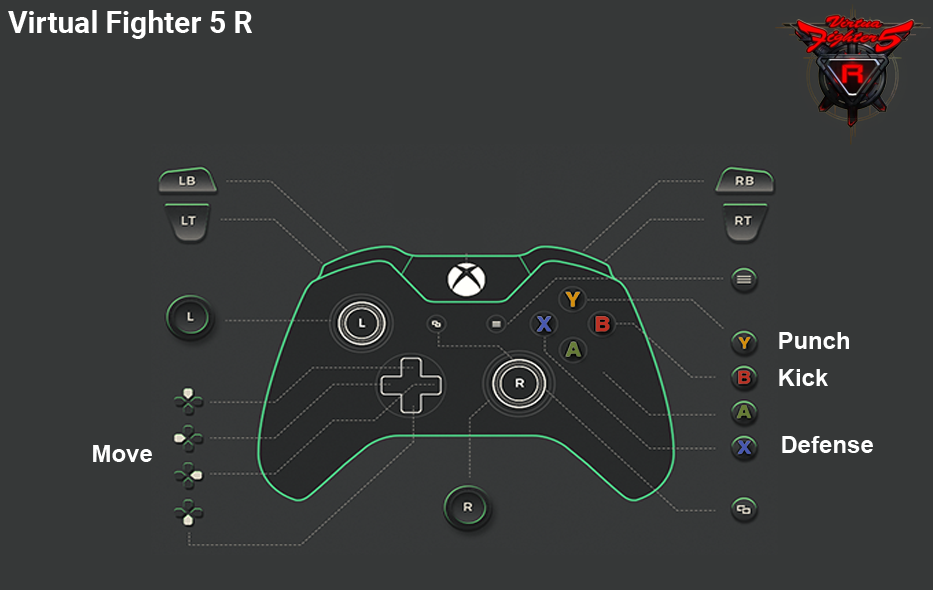
<style>
.page{position:relative;width:933px;height:590px;background:#363838}
.page>*{position:absolute;margin:0}
.t1{font:30px "Roboto-Bold";color:#ffffff}
.t2{font:24px "Arial-BoldMT";color:#fefefe}
</style>
<div class="page">
<p class="t1" style="left:8px;top:10px;width:244px;height:29px">Virtual Fighter 5 R</p>
<p class="t2" style="left:779px;top:332px;width:70px;height:17px">Punch</p>
<p class="t2" style="left:779px;top:369px;width:49px;height:17px">Kick</p>
<p class="t2" style="left:782px;top:436px;width:91px;height:17px">Defense</p>
<p class="t2" style="left:93px;top:445px;width:59px;height:17px">Move</p>
</div>
